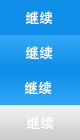
<style>
.page{position:relative;width:80px;height:140px;background:#0e8ee7}
.page>*{position:absolute;margin:0}
.t1{font:14px "AdobeHeitiStd-Regular";color:#ffffff}
.t2{font:14px "AdobeHeitiStd-Regular"}
</style>
<div class="page">
<p class="t1" style="left:25px;top:11px;width:28px;height:14px">继续</p>
<p class="t2" style="left:26px;top:11px;width:27px;height:14px">卸载</p>
<p class="t1" style="left:25px;top:46px;width:28px;height:14px">继续</p>
<p class="t2" style="left:26px;top:46px;width:27px;height:14px">卸载</p>
<p class="t1" style="left:24px;top:81px;width:28px;height:14px">继续</p>
<p class="t2" style="left:25px;top:81px;width:27px;height:14px">卸载</p>
<p class="t1" style="left:26px;top:116px;width:28px;height:14px">继续</p>
<p class="t1" style="left:27px;top:116px;width:27px;height:14px">卸载</p>
</div>
